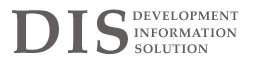
<style>
.page{position:relative;width:254px;height:63px;background:#ffffff}
.page>*{position:absolute;margin:0}
.t1{font:62.5px "Palatino-Bold";letter-spacing:0.05em;color:#635d5d;text-transform:uppercase}
.t2{font:12.5px "Palatino-Bold";letter-spacing:0.05em;color:#635d5d;text-transform:uppercase}
</style>
<div class="page">
<p class="t1" style="left:12px;top:9px;width:116px;height:45px">DIS</p>
<p class="t2" style="left:132px;top:11px;width:107px;height:10px">Development</p>
<p class="t2" style="left:134px;top:28px;width:103px;height:10px">Information</p>
<p class="t2" style="left:135px;top:44px;width:73px;height:10px">Solution</p>
</div>
